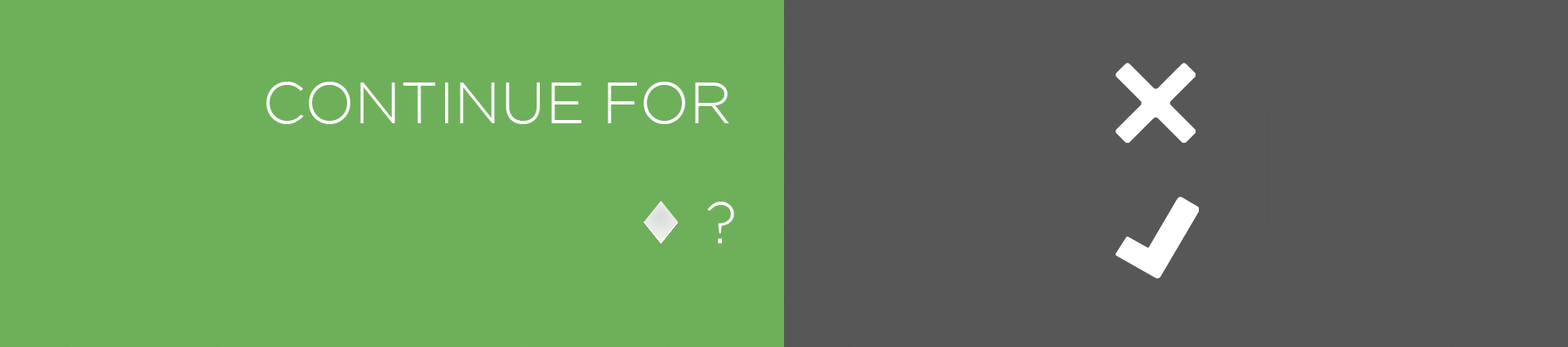
<style>
.page{position:relative;width:1568px;height:347px;background:#575757}
.page>*{position:absolute;margin:0}
.t1{font:14.1px "Gotham-Light";color:#fefefe}
</style>
<div class="page">
<p class="t1" style="left:266px;top:82px;width:463px;height:42px">CONTINUE FOR</p>
<p class="t1" style="left:707px;top:202px;width:27px;height:41px">?</p>
</div>
